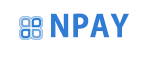
<style>
.page{position:relative;width:150px;height:57px;background:#ffffff}
.page>*{position:absolute;margin:0}
.t1{font:30px "AdobeGothicStd-Bold";color:#2e7cd4;font-weight:bold}
</style>
<div class="page">
<p class="t1" style="left:51px;top:13px;width:78px;height:25px">NPAY</p>
</div>
